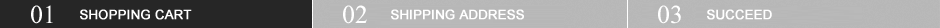
<style>
.page{position:relative;width:940px;height:28px;background:#b7b7b7}
.page>*{position:absolute;margin:0}
.t1{font:26px "MongolianBaiti";color:#ffffff}
.t2{font:13px "ArialMT";color:#ffffff;font-weight:bold}
</style>
<div class="page">
<p class="t1" style="left:31px;top:5px;width:22px;height:19px">01</p>
<p class="t1" style="left:343px;top:5px;width:24px;height:19px">02</p>
<p class="t1" style="left:658px;top:5px;width:23px;height:19px">03</p>
<p class="t2" style="left:80px;top:9px;width:112px;height:11px">SHOPPING CART</p>
<p class="t2" style="left:391px;top:9px;width:133px;height:11px">SHIPPING ADDRESS</p>
<p class="t2" style="left:707px;top:9px;width:65px;height:11px">SUCCEED</p>
</div>
